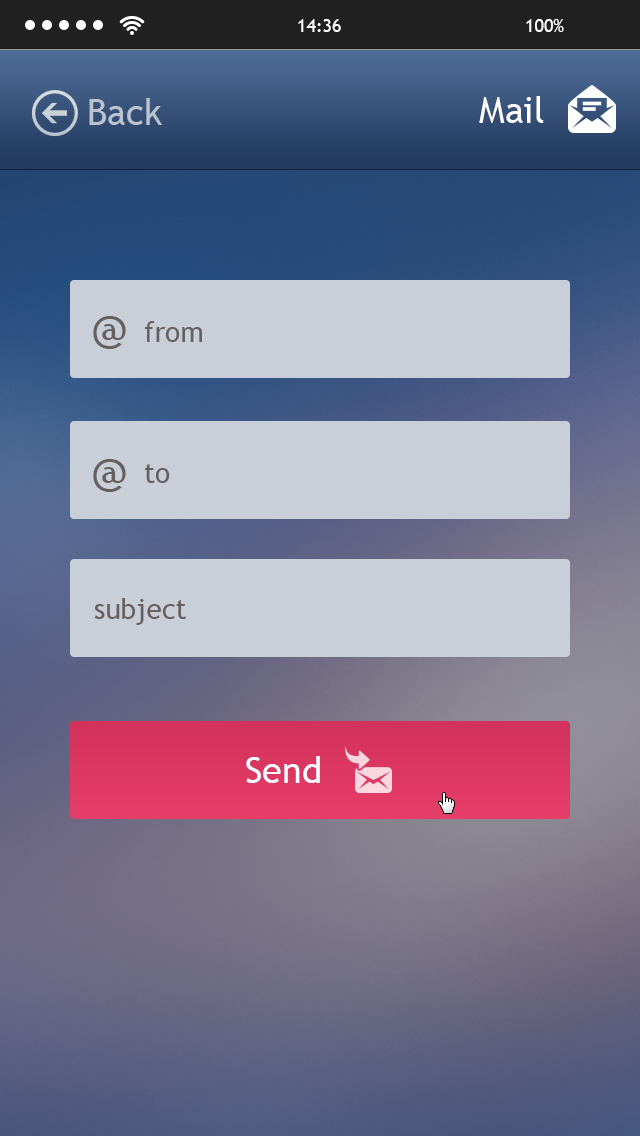
<style>
.page{position:relative;width:640px;height:1136px}
.page>*{position:absolute;margin:0}
.t1{font:36px "TrebuchetMS";color:#bbc3ce}
.t2{font:36px "TrebuchetMS";color:#ffffff}
.t3{font:48px "TrebuchetMS";color:#675e5e;text-transform:uppercase}
.t4{font:28px "TrebuchetMS";color:#675e5e}
</style>
<div class="page">
<p class="t1" style="left:89px;top:98px;width:73px;height:27px">Back</p>
<p class="t2" style="left:479px;top:96px;width:65px;height:27px">Mail</p>
<p class="t3" style="left:93px;top:316px;width:33px;height:33px">@</p>
<p class="t4" style="left:144px;top:321px;width:58px;height:21px">from</p>
<p class="t3" style="left:93px;top:459px;width:33px;height:33px">@</p>
<p class="t4" style="left:145px;top:464px;width:25px;height:19px">to</p>
<p class="t4" style="left:94px;top:598px;width:92px;height:27px">subject</p>
<p class="t2" style="left:246px;top:756px;width:74px;height:27px">Send</p>
</div>
